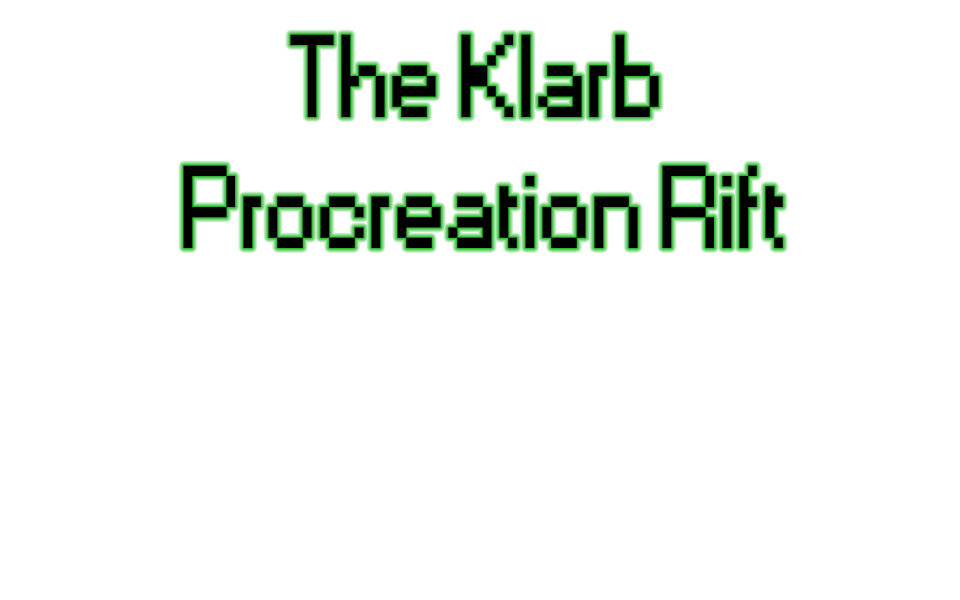
<style>
.page{position:relative;width:960px;height:600px;background:#ffffff}
.page>*{position:absolute;margin:0}
.t1{font:109.6px "Small Fonts";color:#000000}
</style>
<div class="page">
<p class="t1" style="left:183px;top:34px;width:600px;height:214px;text-align:center">The Klarb <br>Procreation Rift</p>
</div>
